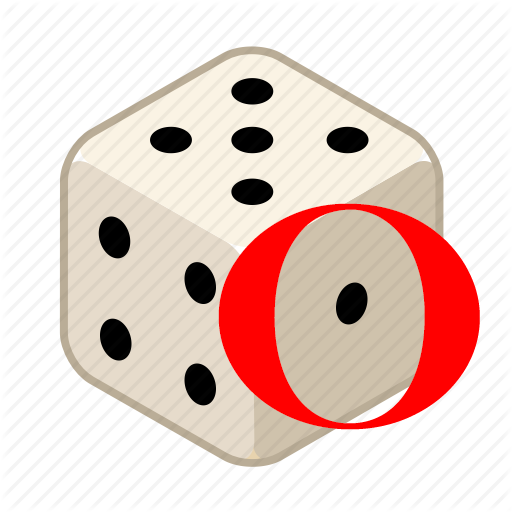
<style>
.page{position:relative;width:512px;height:512px;background:#ffffff}
.page>*{position:absolute;margin:0}
.t1{font:318px "EngraversMT";color:#ff0000}
</style>
<div class="page">
<p class="t1" style="left:218px;top:203px;width:262px;height:227px">O</p>
</div>
